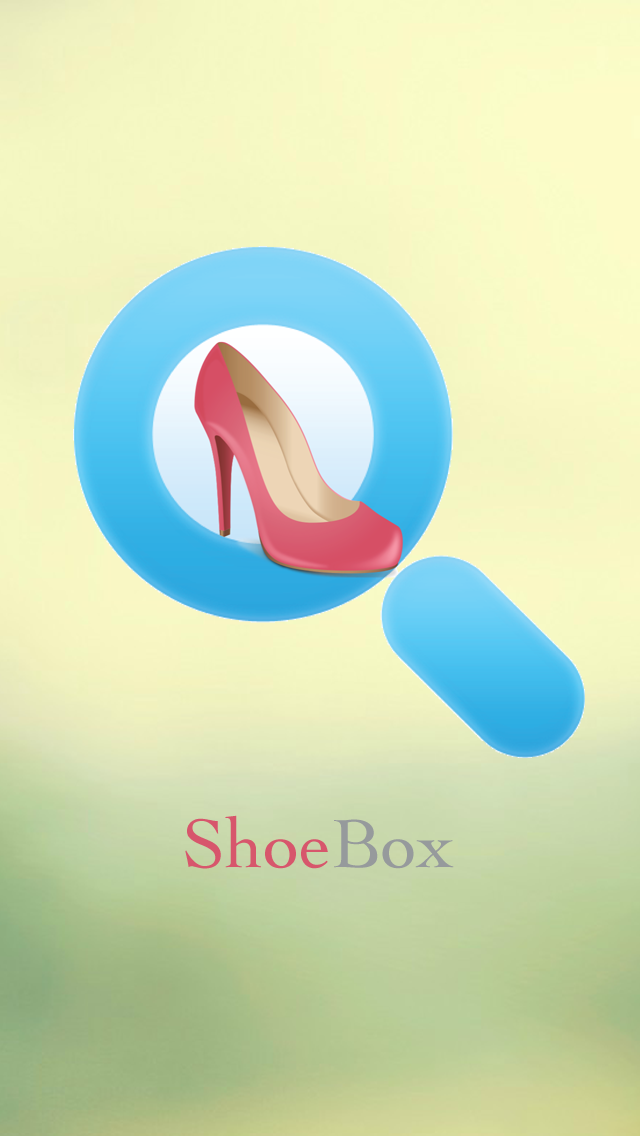
<style>
.page{position:relative;width:640px;height:1136px}
.page>*{position:absolute;margin:0}
.t1{font:72px "Cochin";color:#d7566c}
.t2{font:72px "Cochin";color:#969a9c}
</style>
<div class="page">
<p class="t1" style="left:185px;top:815px;width:269px;height:54px">Shoe<span class="t2">Box</span></p>
</div>
